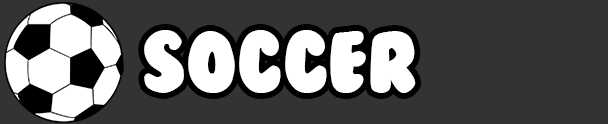
<style>
.page{position:relative;width:608px;height:124px;background:#333333}
.page>*{position:absolute;margin:0}
.t1{font:80px "BubbleGum";color:#ffffff}
</style>
<div class="page">
<p class="t1" style="left:144px;top:30px;width:272px;height:63px">soccer</p>
</div>
